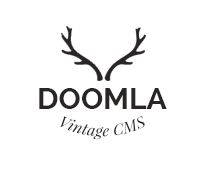
<style>
.page{position:relative;width:206px;height:175px;background:#ffffff}
.page>*{position:absolute;margin:0}
.t1{font:30px "Raleway-Bold";color:#292625}
.t2{font:14px "PlayfairDisplay-Italic";color:#292625}
</style>
<div class="page">
<p class="t1" style="left:39px;top:88px;width:128px;height:21px">DOOMLA</p>
<p class="t2" style="left:60px;top:115px;width:85px;height:25px">Vintage CMS</p>
</div>
